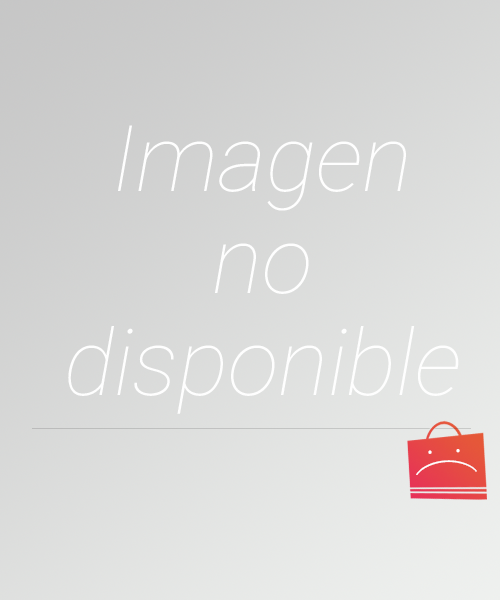
<style>
.page{position:relative;width:500px;height:600px}
.page>*{position:absolute;margin:0}
.t1{font:92px "Roboto-ThinItalic";letter-spacing:-0.008em;color:#fefefe}
.t2{font:59.9px "Roboto-Thin";letter-spacing:-0.008em;color:#fefefe}
</style>
<div class="page">
<p class="t1" style="left:68px;top:125px;width:391px;height:289px;text-align:center">Imagen<br>no<br>disponible</p>
<p class="t2" style="left:416px;top:449px;width:61px;height:26px;rotate:87deg">:(</p>
</div>
